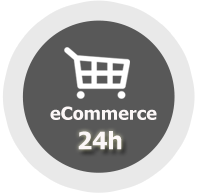
<style>
.page{position:relative;width:197px;height:194px;background:#585858}
.page>*{position:absolute;margin:0}
.t1{font:18px "Tahoma-Bold";color:#fcf7f7}
.t2{font:24px "Tahoma-Bold";color:#fcf7f7}
</style>
<div class="page">
<p class="t1" style="left:50px;top:106px;width:107px;height:14px">eCommerce</p>
<p class="t2" style="left:78px;top:131px;width:44px;height:19px">24h</p>
</div>
